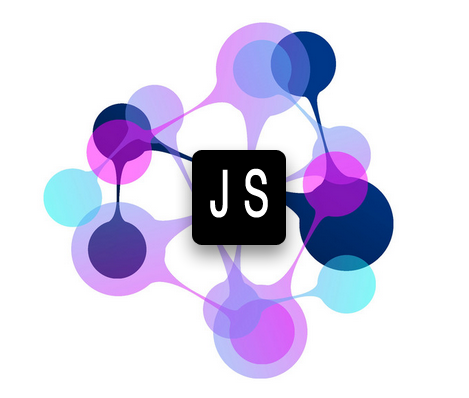
<style>
.page{position:relative;width:469px;height:398px;background:#ffffff}
.page>*{position:absolute;margin:0}
.t1{font:64px "HelveticaNeueLTPro-Roman";letter-spacing:0.2em;color:#ffffff;text-transform:uppercase;font-weight:bold;scale:0.6 1}
</style>
<div class="page">
<p class="t1" style="left:210px;top:168px;width:58px;height:50px">JS</p>
</div>
